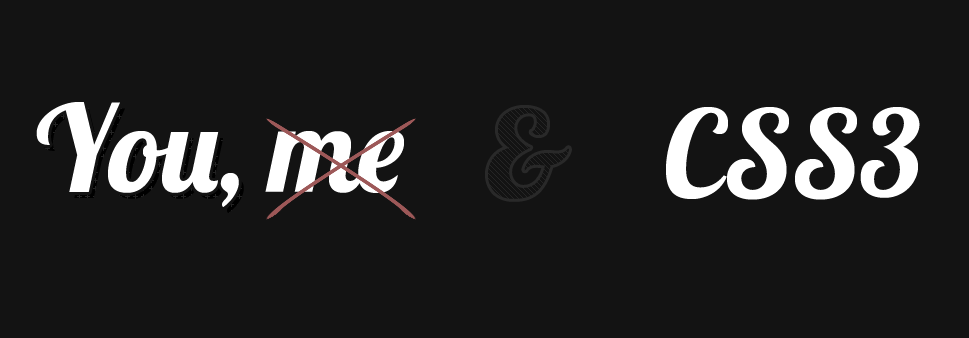
<style>
.page{position:relative;width:969px;height:338px;background:#131313}
.page>*{position:absolute;margin:0}
.t1{font:120px "Lobster1.4";color:#ffffff}
.t2{font:120px "Lobster1.4"}
.t3{font:120px "Lobster1.4";color:#fefefe}
</style>
<div class="page">
<p class="t1" style="left:36px;top:102px;width:368px;height:105px">You, me</p>
<p class="t2" style="left:41px;top:108px;width:203px;height:105px">You,</p>
<p class="t3" style="left:666px;top:107px;width:254px;height:93px">CSS3</p>
</div>
